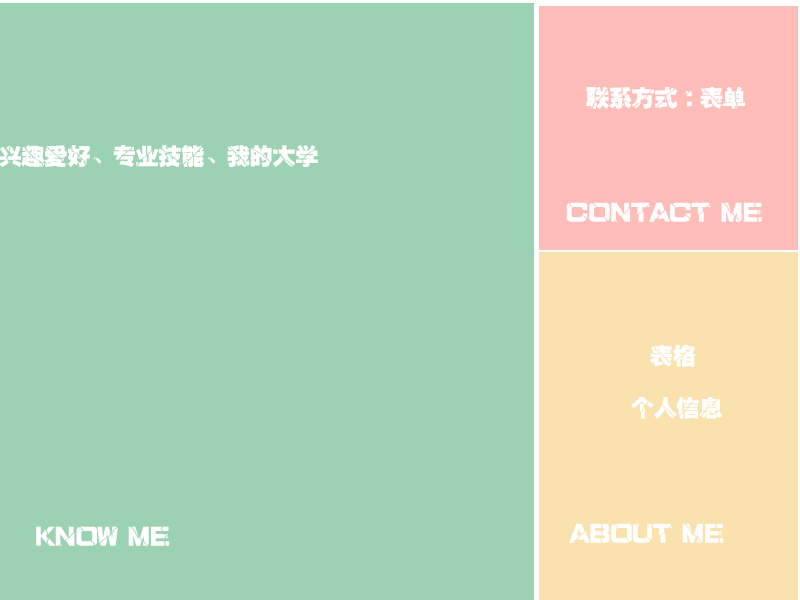
<style>
.page{position:relative;width:800px;height:600px;background:#9bd3b2}
.page>*{position:absolute;margin:0}
.t1{font:24px "PiliEG-Ultra-GB";letter-spacing:-0.05em;color:#ffffff;text-transform:uppercase}
</style>
<div class="page">
<p class="t1" style="left:586px;top:86px;width:159px;height:23px">联系方式：表单</p>
<p class="t1" style="left:0px;top:145px;width:318px;height:23px">兴趣爱好、专业技能、我的大学</p>
<p class="t1" style="left:566px;top:202px;width:196px;height:20px">Contact Me</p>
<p class="t1" style="left:650px;top:345px;width:46px;height:22px">表格</p>
<p class="t1" style="left:631px;top:396px;width:91px;height:23px">个人信息</p>
<p class="t1" style="left:36px;top:526px;width:133px;height:20px">Know Me</p>
<p class="t1" style="left:569px;top:523px;width:155px;height:20px">About Me</p>
</div>
